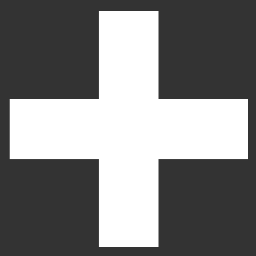
<style>
.page{position:relative;width:256px;height:256px;background:#333333}
.page>*{position:absolute;margin:0}
.t1{font:476.2px "Arial-BoldMT";color:#ffffff;text-transform:uppercase}
</style>
<div class="page">
<p class="t1" style="left:9px;top:11px;width:239px;height:236px">+</p>
</div>
